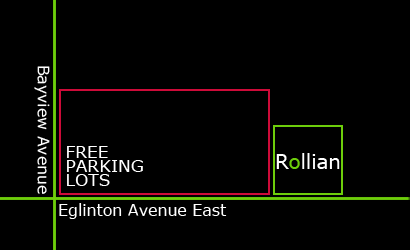
<style>
.page{position:relative;width:410px;height:250px;background:#000000}
.page>*{position:absolute;margin:0}
.t1{font:15.8px "Verdana";color:#ffffff}
.t2{font:17px/14px "Verdana";color:#ffffff}
.t3{font:19.6px "Verdana";color:#ffffff}
.t4{font:19.6px "Verdana";color:#6dce0b}
</style>
<div class="page">
<p class="t1" style="left:34px;top:66px;width:16px;height:128px;rotate:90deg">Bayview Avenue</p>
<p class="t2" style="left:67px;top:146px;width:76px;height:40px">FREE<br>PARKING<br>LOTS</p>
<p class="t3" style="left:276px;top:153px;width:64px;height:16px">R<span class="t4">o</span>llian</p>
<p class="t1" style="left:59px;top:203px;width:168px;height:16px">Eglinton Avenue East</p>
</div>
